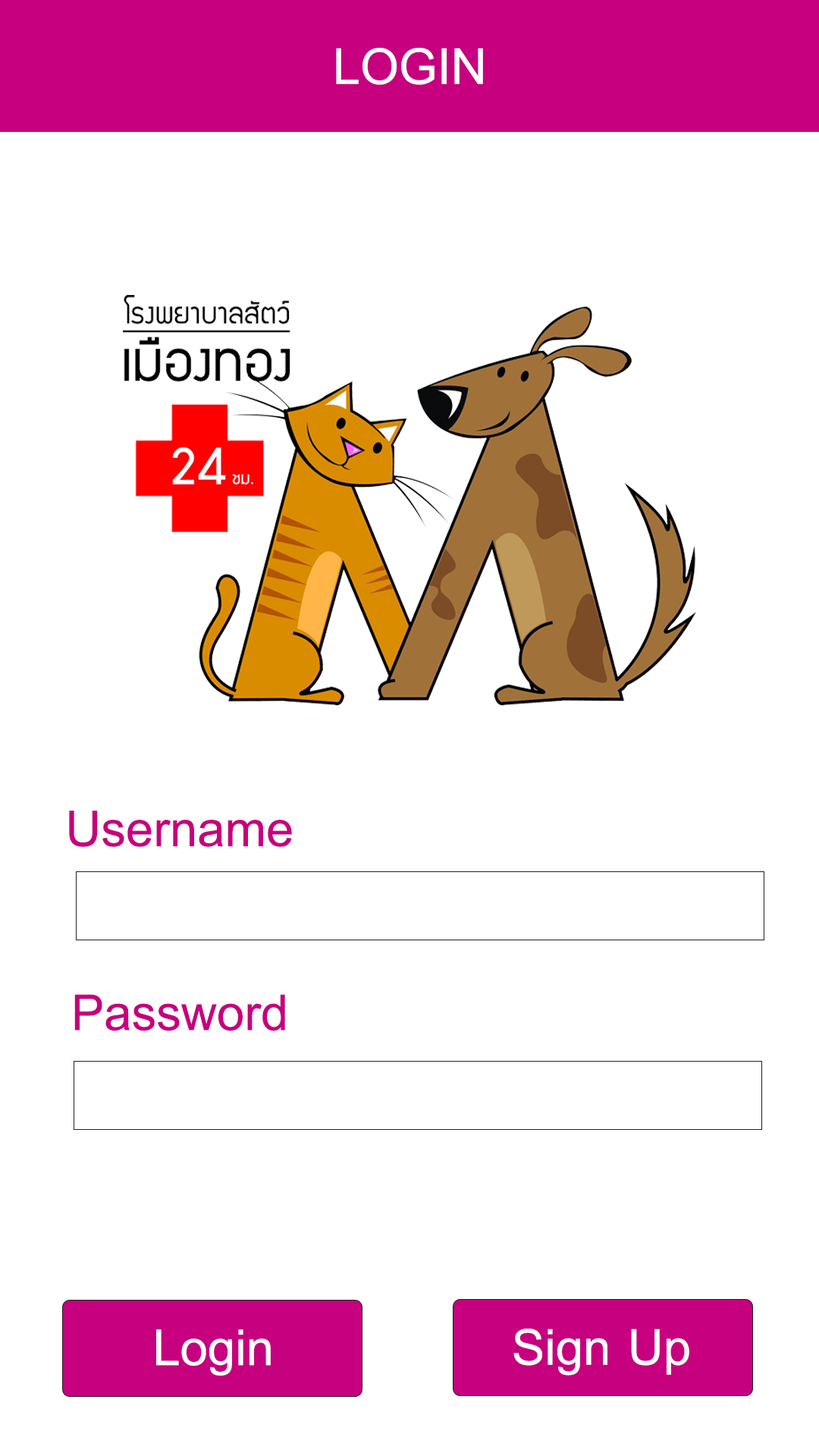
<style>
.page{position:relative;width:819px;height:1456px;background:#ffffff}
.page>*{position:absolute;margin:0}
.t1{font:75.8px "BrowalliaNew";color:#ffffff}
.t2{font:75.8px "BrowalliaNew";color:#c6007e}
</style>
<div class="page">
<p class="t1" style="left:336px;top:48px;width:147px;height:37px">LOGIN</p>
<p class="t2" style="left:69px;top:811px;width:223px;height:36px">Username</p>
<p class="t2" style="left:74px;top:994px;width:211px;height:37px">Password</p>
<p class="t1" style="left:156px;top:1329px;width:115px;height:47px">Login</p>
<p class="t1" style="left:513px;top:1329px;width:176px;height:47px">Sign Up</p>
</div>
